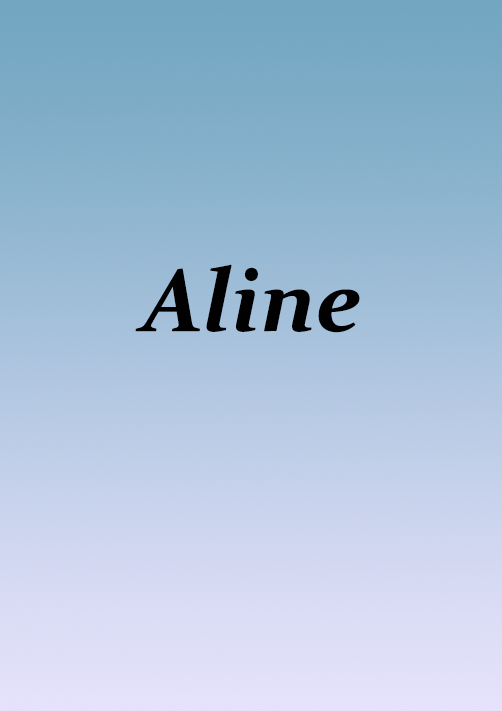
<style>
.page{position:relative;width:502px;height:711px}
.page>*{position:absolute;margin:0}
.t1{font:90px "Constantia-BoldItalic";color:#010101}
</style>
<div class="page">
<p class="t1" style="left:135px;top:264px;width:225px;height:69px">Aline</p>
</div>
